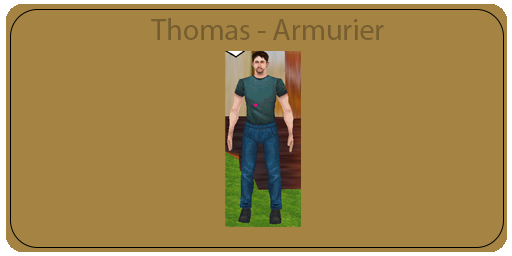
<style>
.page{position:relative;width:512px;height:256px;background:#a58342}
.page>*{position:absolute;margin:0}
.t1{font:30px "MyriadPro-Regular";color:#765e31}
</style>
<div class="page">
<p class="t1" style="left:151px;top:18px;width:233px;height:22px">Thomas - Armurier</p>
</div>
